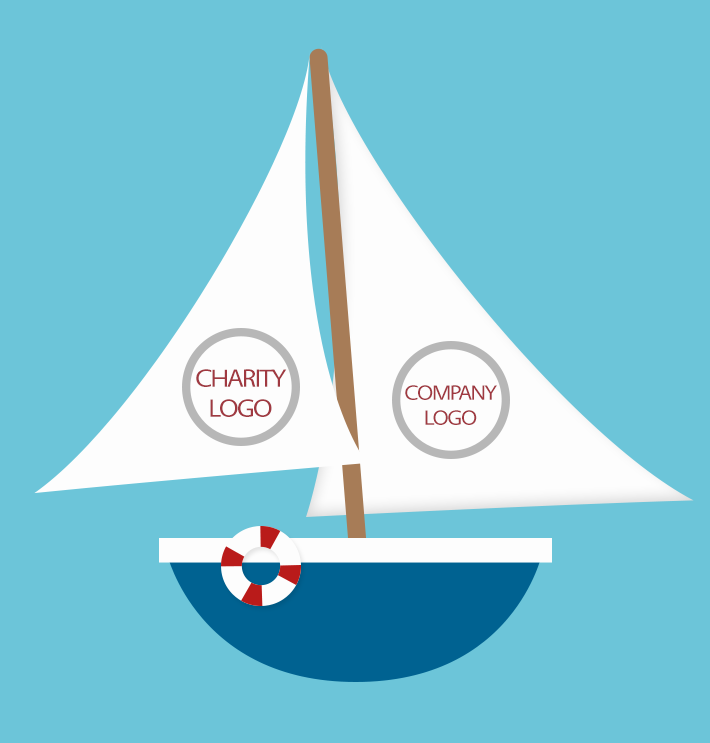
<style>
.page{position:relative;width:710px;height:743px;background:#6cc5d9}
.page>*{position:absolute;margin:0}
.t1{font:25px "Vegur-Regular";letter-spacing:-0.06em;color:#a03941;scale:1.1 1}
.t2{font:20.8px "Vegur-Regular";letter-spacing:-0.06em;color:#a03941;scale:1.1 1}
</style>
<div class="page">
<p class="t1" style="left:196px;top:369px;width:91px;height:48px;text-align:center">CHARITY<br>LOGO</p>
<p class="t2" style="left:405px;top:385px;width:92px;height:40px;text-align:center">COMPANY<br>LOGO</p>
</div>
